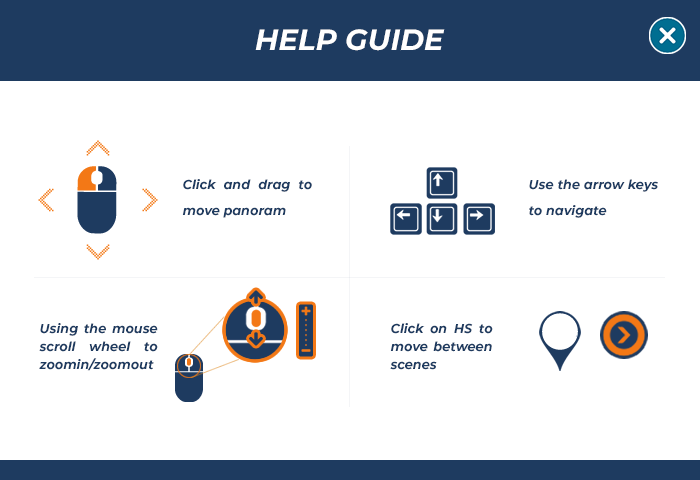
<style>
.page{position:relative;width:700px;height:480px;background:#ffffff}
.page>*{position:absolute;margin:0}
.t1{font:50px "Montserrat-BoldItalic";color:#ffffff}
.t2{font:22px "Montserrat-BoldItalic";color:#1e3b60}
.t3{font:22px/18px "Montserrat-BoldItalic";color:#1e3b60}
</style>
<div class="page">
<p class="t1" style="left:255px;top:29px;width:190px;height:22px">HELP GUIDE</p>
<p class="t2" style="left:182px;top:179px;width:130px;height:39px;text-align:justify">Click and drag to move panoram</p>
<p class="t2" style="left:529px;top:179px;width:129px;height:39px;text-align:justify">Use the arrow keys to navigate</p>
<p class="t3" style="left:39px;top:323px;width:119px;height:48px;text-align:justify">Using the mouse scroll wheel to zoomin/zoomout</p>
<p class="t3" style="left:390px;top:323px;width:103px;height:47px;text-align:justify">Click on HS to move between scenes</p>
</div>
